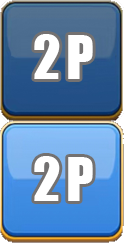
<style>
.page{position:relative;width:124px;height:243px}
.page>*{position:absolute;margin:0}
.t1{font:56.1px "Impact";letter-spacing:0.1em;color:#ffffff}
</style>
<div class="page">
<p class="t1" style="left:34px;top:34px;width:59px;height:45px">2P</p>
<p class="t1" style="left:34px;top:156px;width:59px;height:45px">2P</p>
</div>
